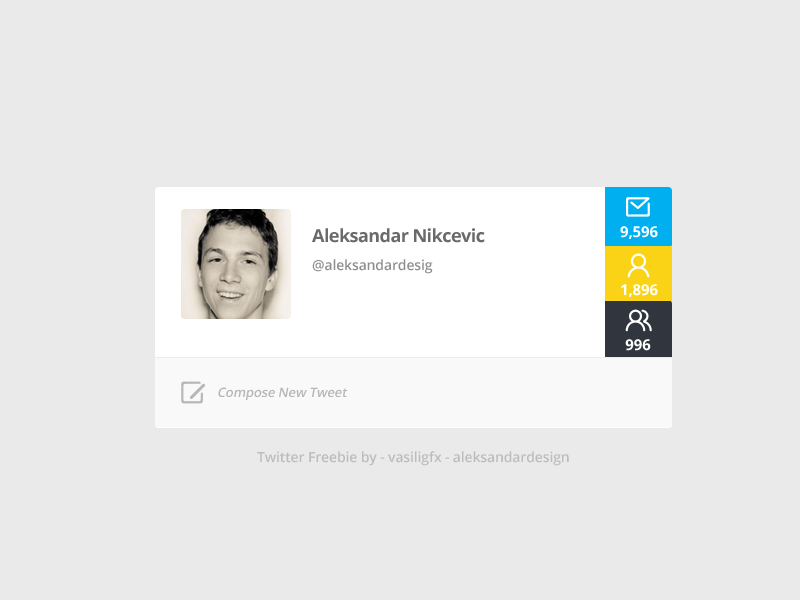
<style>
.page{position:relative;width:800px;height:600px;background:#eaeaea}
.page>*{position:absolute;margin:0}
.t1{font:18px "OpenSans-Bold";letter-spacing:-0.03em;color:#6a6a6a}
.t2{font:15px "OpenSans-Bold";letter-spacing:-0.01em;color:#ffffff}
.t3{font:14px "OpenSans-Semibold";letter-spacing:-0.01em;color:#8f8f8f}
.t4{font:13px "OpenSans-Semibold";letter-spacing:-0.01em;color:#b6b6b6;font-style:italic}
.t5{font:14px "OpenSans-Semibold";letter-spacing:-0.01em;color:#bcbcbc}
</style>
<div class="page">
<p class="t1" style="left:312px;top:228px;width:173px;height:15px">Aleksandar Nikcevic</p>
<p class="t2" style="left:620px;top:226px;width:38px;height:13px">9,596</p>
<p class="t3" style="left:312px;top:259px;width:121px;height:15px">@aleksandardesig</p>
<p class="t2" style="left:621px;top:284px;width:37px;height:13px">1,896</p>
<p class="t2" style="left:625px;top:339px;width:26px;height:12px">996</p>
<p class="t4" style="left:218px;top:387px;width:130px;height:13px">Compose New Tweet</p>
<p class="t5" style="left:257px;top:451px;width:312px;height:15px">Twitter Freebie by - vasiligfx - aleksandardesign</p>
</div>
